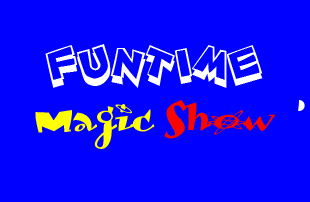
<style>
.page{position:relative;width:310px;height:202px;background:#0000fe}
.page>*{position:absolute;margin:0}
.t1{font:44.9px "ZoinkFat";color:#ffffff;scale:0.96 1}
.t2{font:42.8px "LambadaDexter-Medium";color:#f90600;scale:1.03 1}
.t3{font:40.1px "LambadaDexter-Medium";color:#fffe03;scale:1.1 1}
</style>
<div class="page">
<p class="t1" style="left:45px;top:44px;width:218px;height:44px">FUNTIME</p>
<p class="t2" style="left:164px;top:100px;width:112px;height:39px">Show</p>
<p class="t3" style="left:35px;top:104px;width:120px;height:45px">Magic</p>
</div>
